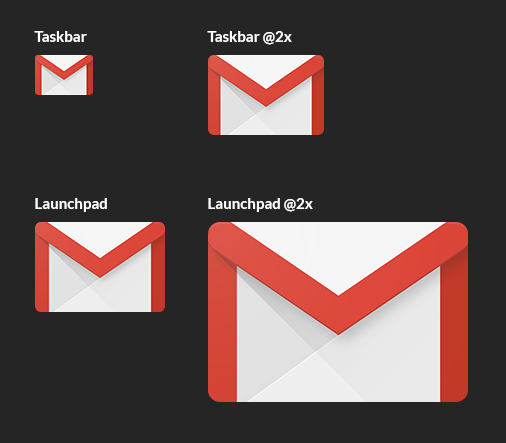
<style>
.page{position:relative;width:506px;height:443px;background:#252525}
.page>*{position:absolute;margin:0}
.t1{font:15px "Lato-Bold";color:#ffffff}
</style>
<div class="page">
<p class="t1" style="left:34px;top:31px;width:53px;height:11px">Taskbar</p>
<p class="t1" style="left:207px;top:31px;width:85px;height:14px">Taskbar @2x</p>
<p class="t1" style="left:35px;top:198px;width:72px;height:14px">Launchpad</p>
<p class="t1" style="left:208px;top:198px;width:105px;height:14px">Launchpad @2x</p>
</div>
